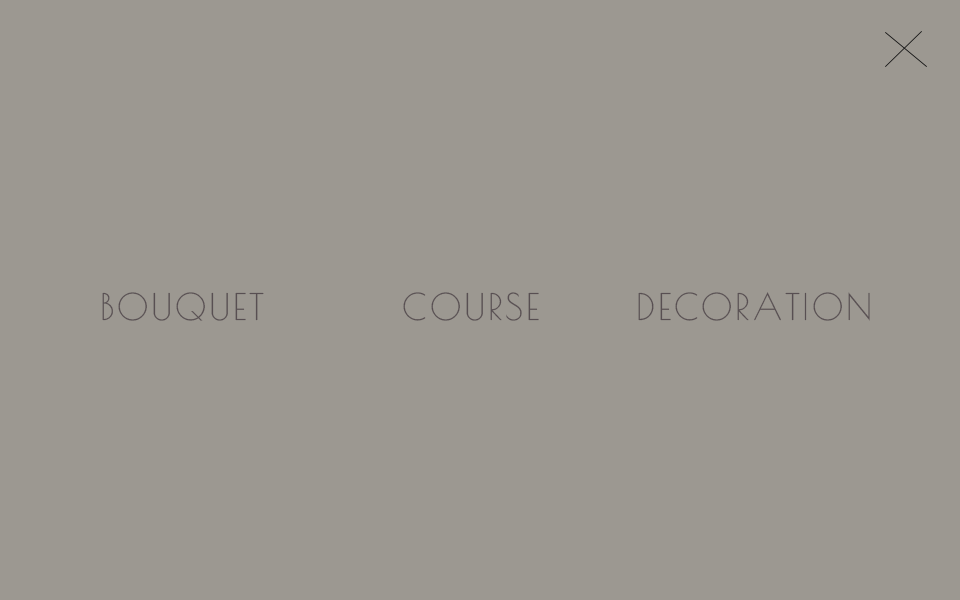
<style>
.page{position:relative;width:960px;height:600px;background:#9c9891}
.page>*{position:absolute;margin:0}
.t1{font:36px "PoiretOne-Regular";letter-spacing:0.075em;color:#584f52;text-transform:uppercase}
</style>
<div class="page">
<p class="t1" style="left:102px;top:292px;width:162px;height:29px">Bouquet</p>
<p class="t1" style="left:403px;top:292px;width:136px;height:29px">Course</p>
<p class="t1" style="left:638px;top:292px;width:232px;height:29px">decoration</p>
</div>
